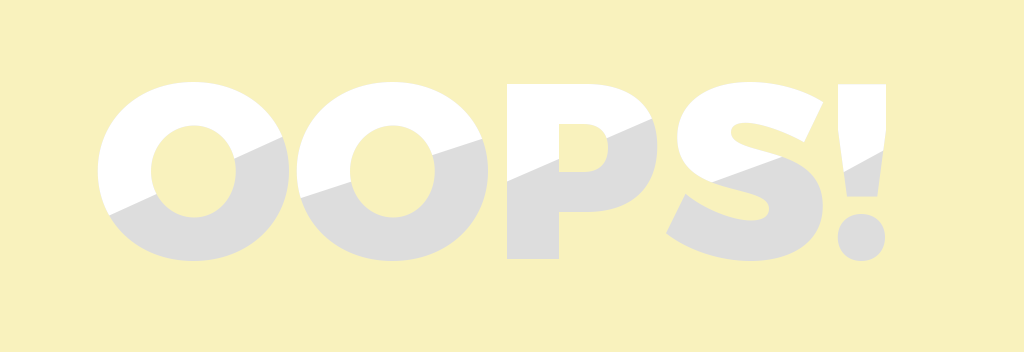
<style>
.page{position:relative;width:1024px;height:352px;background:#f9f2bd}
.page>*{position:absolute;margin:0}
.t1{font:250px "Montserrat-ExtraBold"}
</style>
<div class="page">
<p class="t1" style="left:97px;top:82px;width:789px;height:179px">OOPS!</p>
</div>
